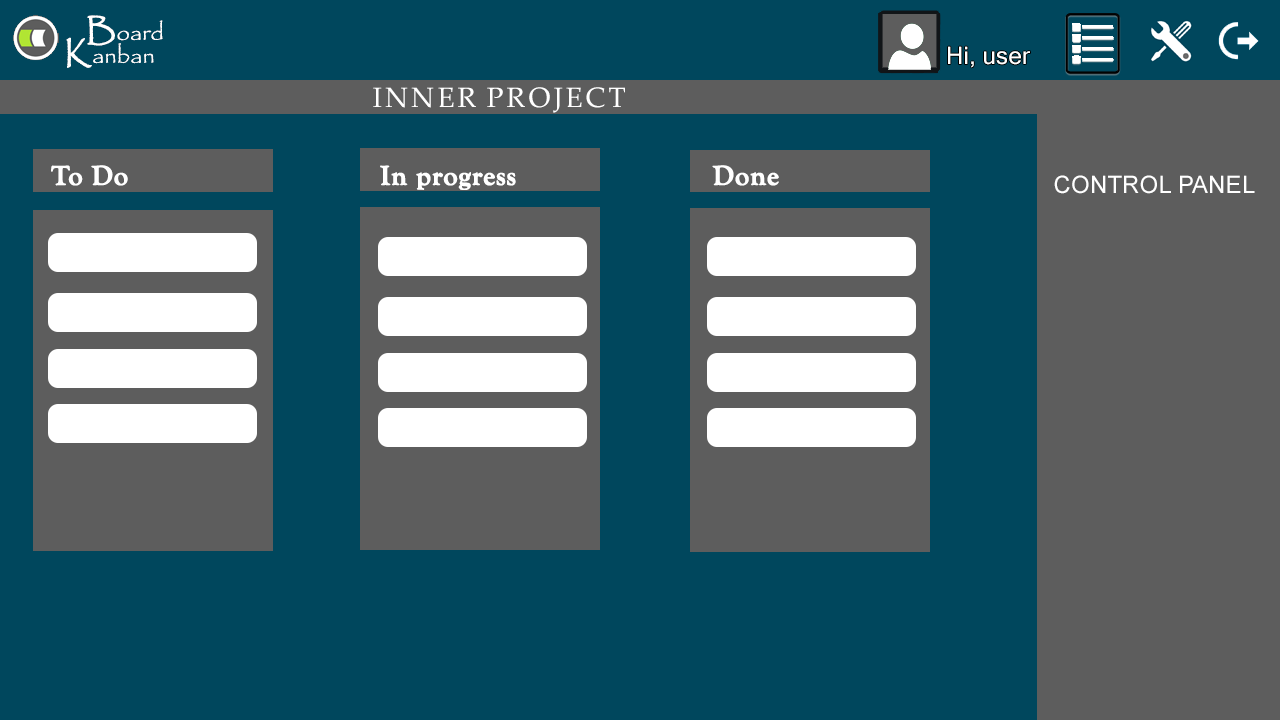
<style>
.page{position:relative;width:1280px;height:720px;background:#00475d}
.page>*{position:absolute;margin:0}
.t1{font:24px "Papyrus-Regular";color:#ffffff}
.t2{font:30px "Papyrus-Regular";color:#ffffff;font-weight:bold}
.t3{font:24px "MicrosoftSansSerif";letter-spacing:0.01em;color:#fefefe}
.t4{font:28px "PalatinoLinotype-Roman";letter-spacing:0.01em;color:#ffffff;text-transform:uppercase}
.t5{font:28px "GoudyOldStyleT-Bold";letter-spacing:0.01em;color:#ffffff;font-weight:bold}
.t6{font:24px "ArialMT";letter-spacing:0.005em;color:#ffffff;text-transform:uppercase}
</style>
<div class="page">
<p class="t1" style="left:87px;top:15px;width:76px;height:31px"><span class="t2">B</span>oard</p>
<p class="t1" style="left:66px;top:37px;width:88px;height:31px"><span class="t2">K</span>anban</p>
<p class="t3" style="left:948px;top:46px;width:82px;height:22px">Hi, user</p>
<p class="t4" style="left:373px;top:87px;width:252px;height:26px">Inner Project</p>
<p class="t5" style="left:51px;top:165px;width:77px;height:21px">To Do</p>
<p class="t5" style="left:380px;top:165px;width:136px;height:25px">In progress</p>
<p class="t5" style="left:712px;top:165px;width:67px;height:21px">Done</p>
<p class="t6" style="left:1054px;top:175px;width:201px;height:19px">Control Panel</p>
</div>
